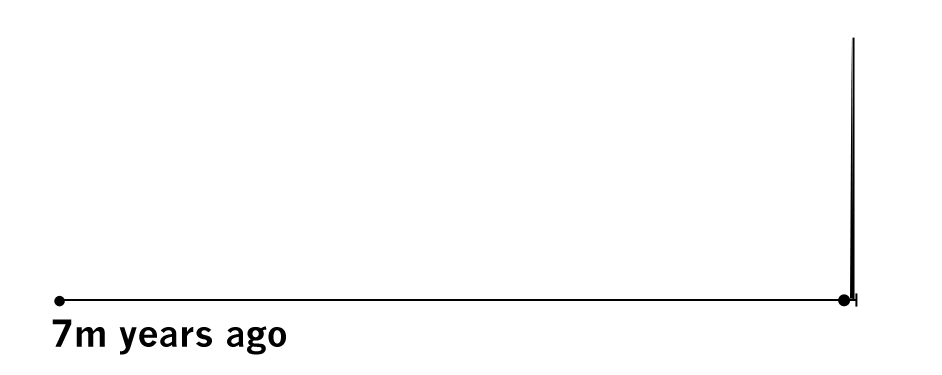
<style>
.page{position:relative;width:942px;height:375px;background:#ffffff}
.page>*{position:absolute;margin:0}
.t1{font:36.5px "NewsGothicMT-Bold";color:#000000}
</style>
<div class="page">
<p class="t1" style="left:52px;top:319px;width:234px;height:36px">7m years ago</p>
</div>
